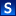
<style>
.page{position:relative;width:16px;height:16px;background:#031a70}
.page>*{position:absolute;margin:0}
.t1{font:13.9px "Tahoma";color:#ffffff;font-weight:bold;scale:0.95 1}
</style>
<div class="page">
<p class="t1" style="left:4px;top:2px;width:8px;height:12px">S</p>
</div>
